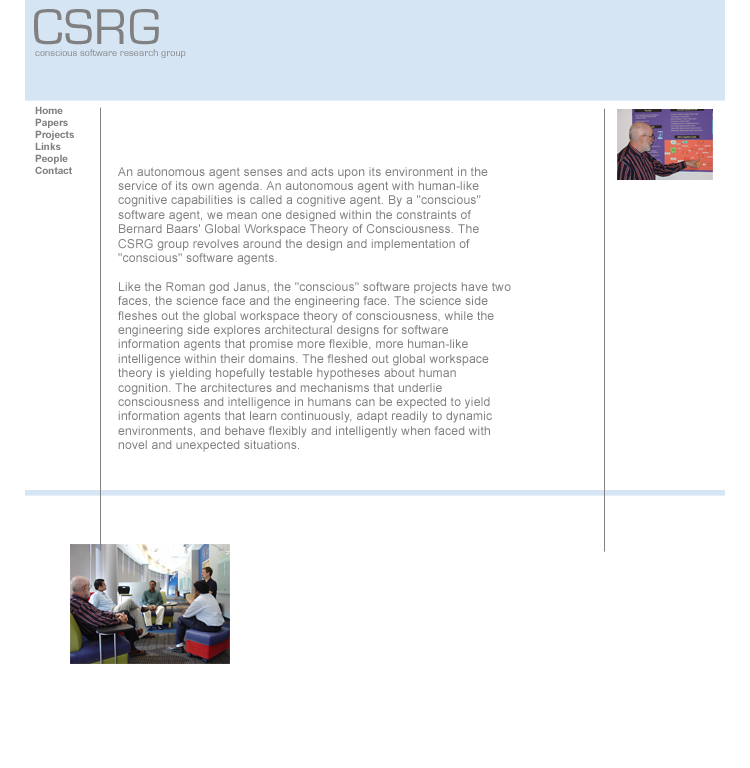
<style>
.page{position:relative;width:750px;height:768px;background:#ffffff}
.page>*{position:absolute;margin:0}
.t1{font:52px "EurostileRegular";letter-spacing:0.02em;color:#808080}
.t2{font:10px "EurostileRegular";letter-spacing:0.01em;color:#808080}
.t3{font:10px "Arial-BoldMT";color:#808080}
.t4{font:12px "ArialMT";letter-spacing:0.02em;color:#808080}
</style>
<div class="page">
<p class="t1" style="left:34px;top:9px;width:125px;height:36px">CSRG</p>
<p class="t2" style="left:35px;top:49px;width:151px;height:9px">conscious software research group</p>
<p class="t3" style="left:35px;top:106px;width:39px;height:68px">Home<br>Papers<br>Projects<br>Links<br>People<br>Contact</p>
<p class="t4" style="left:118px;top:167px;width:393px;height:285px">An autonomous agent senses and acts upon its environment in the service of its own agenda. An autonomous agent with human-like cognitive capabilities is called a cognitive agent. By a "conscious" software agent, we mean one designed within the constraints of Bernard Baars' Global Workspace Theory of Consciousness. The CSRG group revolves around the design and implementation of "conscious" software agents.<br><br>Like the Roman god Janus, the "conscious" software projects have two faces, the science face and the engineering face. The science side fleshes out the global workspace theory of consciousness, while the engineering side explores architectural designs for software information agents that promise more flexible, more human-like intelligence within their domains. The fleshed out global workspace theory is yielding hopefully testable hypotheses about human cognition. The architectures and mechanisms that underlie consciousness and intelligence in humans can be expected to yield information agents that learn continuously, adapt readily to dynamic environments, and behave flexibly and intelligently when faced with novel and unexpected situations.</p>
</div>
